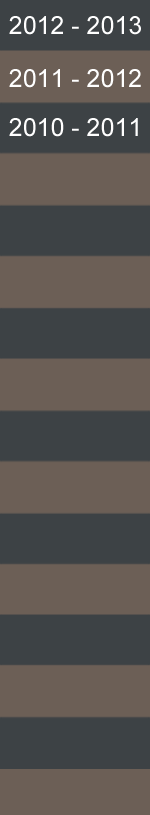
<style>
.page{position:relative;width:150px;height:815px;background:#6c5f56}
.page>*{position:absolute;margin:0}
.t1{font:25px "ArialMT";color:#ffffff}
</style>
<div class="page">
<p class="t1" style="left:9px;top:16px;width:132px;height:19px">2012 - 2013</p>
<p class="t1" style="left:9px;top:69px;width:132px;height:19px">2011 - 2012</p>
<p class="t1" style="left:9px;top:118px;width:129px;height:19px">2010 - 2011</p>
</div>
